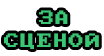
<style>
.page{position:relative;width:104px;height:56px;background:#ffffff}
.page>*{position:absolute;margin:0}
.t1{font:15.4px "PxPlus_IBM_BIOS";letter-spacing:0.075em;color:#39c773}
.t2{font:15.5px "PxPlus_IBM_BIOS";letter-spacing:0.075em;color:#39c773}
</style>
<div class="page">
<p class="t1" style="left:39px;top:10px;width:29px;height:14px">ЗА</p>
<p class="t2" style="left:4px;top:33px;width:95px;height:16px">СЦЕНОЙ</p>
</div>
